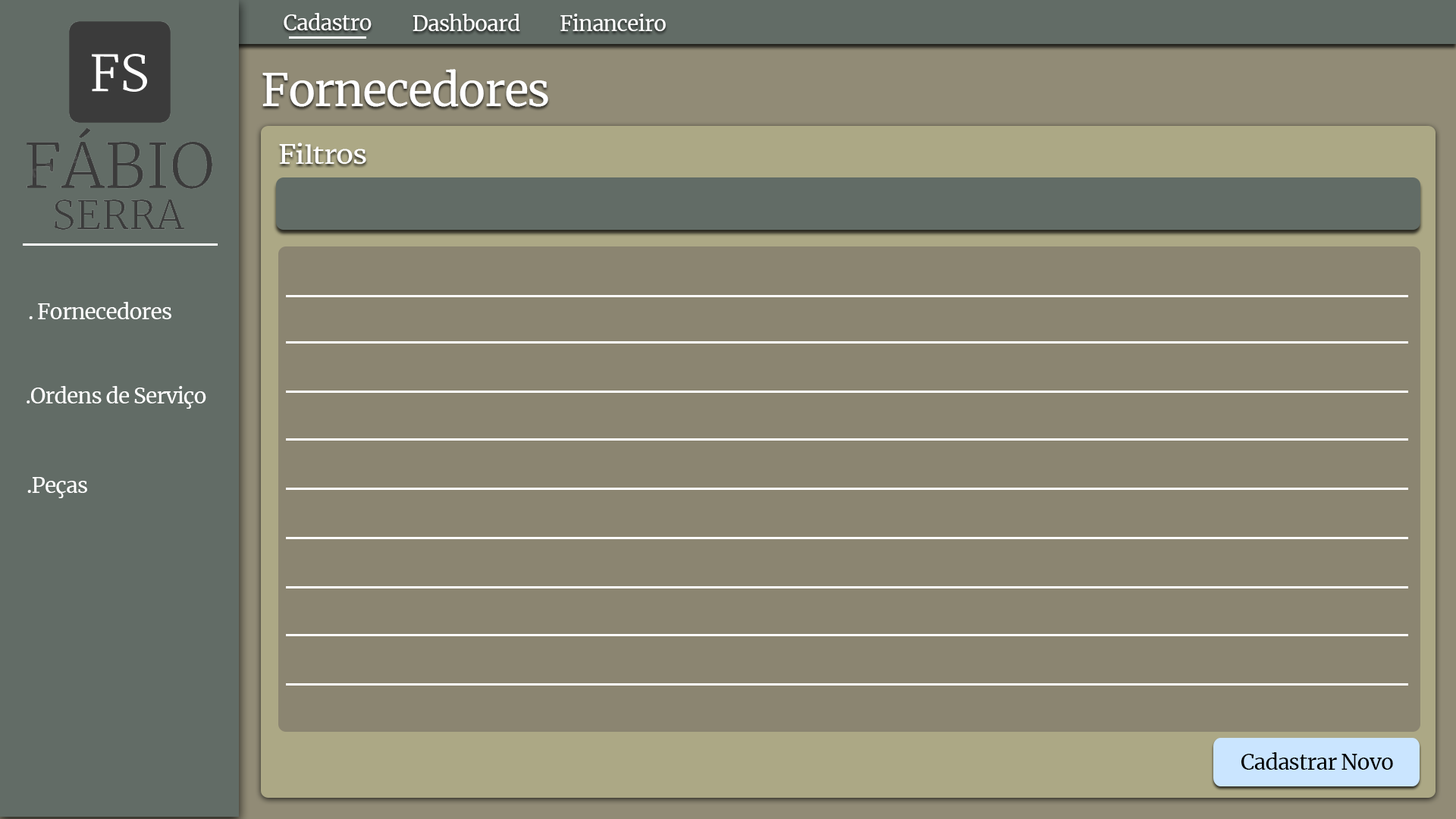
<style>
.page{position:relative;width:1456px;height:819px;background:#8b8571}
.page>*{position:absolute;margin:0}
.t1{font:21.2px "Merriweather-Regular";letter-spacing:-0.03em;color:#ffffff}
.t2{font:45.5px "Merriweather-Regular";letter-spacing:-0.03em;color:#ffffff}
.t3{font:25.9px "Merriweather-Regular";letter-spacing:-0.03em;color:#ffffff;scale:1.11 1}
.t4{font:21.2px "Merriweather-Regular";letter-spacing:-0.03em;color:#000000}
</style>
<div class="page">
<p class="t1" style="left:284px;top:13px;width:88px;height:17px">Cadastro</p>
<p class="t1" style="left:413px;top:14px;width:107px;height:17px">Dashboard</p>
<p class="t1" style="left:560px;top:14px;width:106px;height:17px">Financeiro</p>
<p class="t2" style="left:262px;top:69px;width:286px;height:38px">Fornecedores</p>
<p class="t3" style="left:279px;top:143px;width:87px;height:21px">Filtros</p>
<p class="t1" style="left:29px;top:302px;width:142px;height:17px">. Fornecedores</p>
<p class="t1" style="left:27px;top:386px;width:179px;height:23px">.Ordens de Serviço</p>
<p class="t1" style="left:27px;top:477px;width:60px;height:21px">.Peças</p>
<p class="t4" style="left:1241px;top:752px;width:152px;height:18px">Cadastrar Novo</p>
</div>
